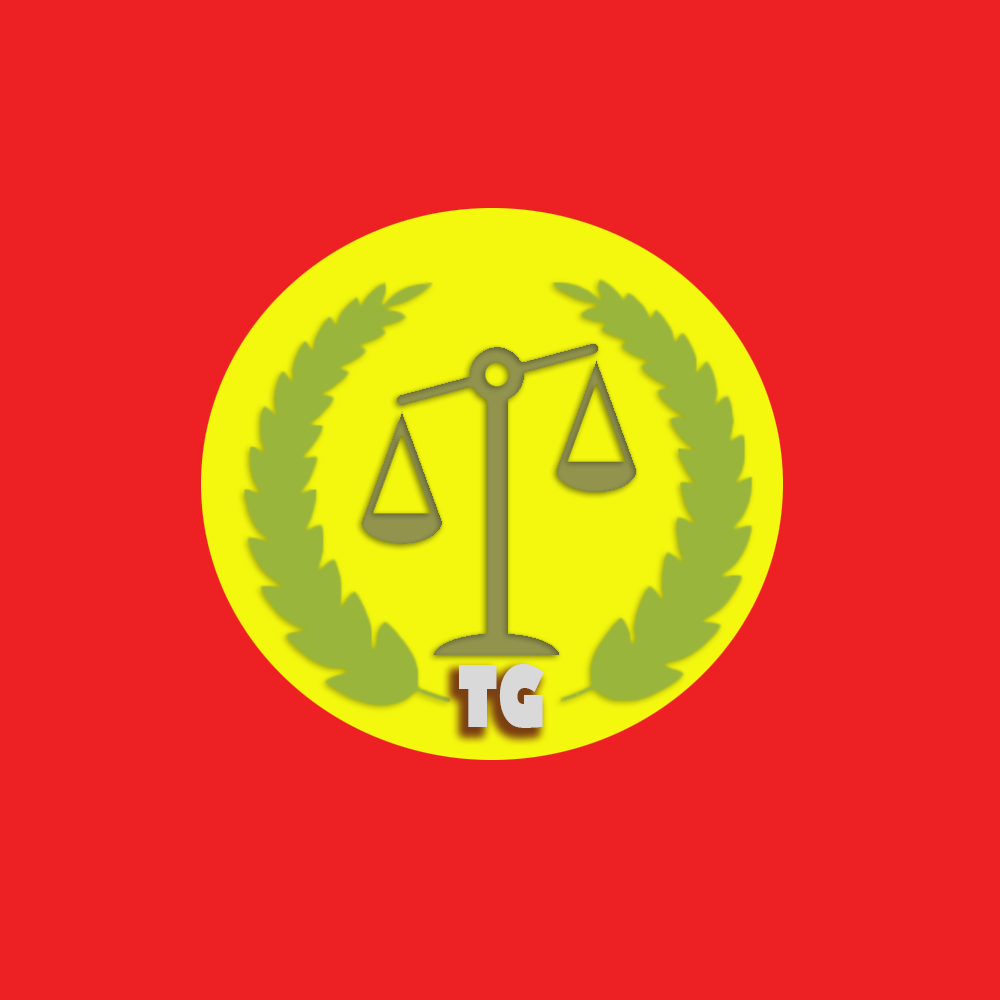
<style>
.page{position:relative;width:1000px;height:1000px;background:#ed2024}
.page>*{position:absolute;margin:0}
.t1{font:83.3px "GillSans-UltraBoldCondensed";color:#d9d9d9}
</style>
<div class="page">
<p class="t1" style="left:459px;top:664px;width:85px;height:64px">TG</p>
</div>
